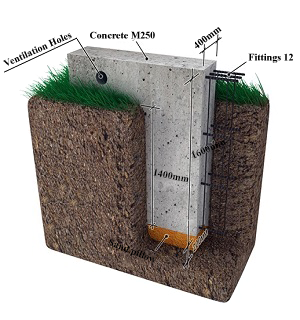
<style>
.page{position:relative;width:300px;height:320px;background:#ffffff}
.page>*{position:absolute;margin:0}
.t1{font:10px "TimesNewRomanPS-BoldMT";color:#000000}
</style>
<div class="page">
<p class="t1" style="left:195px;top:27px;width:27px;height:22px;rotate:-37deg">400mm</p>
<p class="t1" style="left:3px;top:33px;width:69px;height:33px;rotate:-24deg">Ventilation Holes</p>
<p class="t1" style="left:90px;top:31px;width:65px;height:8px">Concrete M250</p>
<p class="t1" style="left:248px;top:53px;width:45px;height:10px">Fittings 12</p>
<p class="t1" style="left:191px;top:140px;width:35px;height:19px;rotate:-25deg">1600mm</p>
<p class="t1" style="left:153px;top:169px;width:36px;height:14px;rotate:11deg">1400mm</p>
<p class="t1" style="left:108px;top:239px;width:49px;height:24px;rotate:22deg">Sand pillow</p>
</div>
